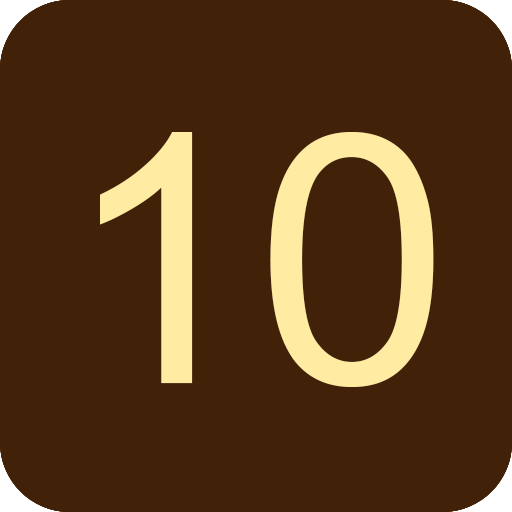
<style>
.page{position:relative;width:512px;height:512px;background:#412209}
.page>*{position:absolute;margin:0}
.t1{font:349px "ArialMT";color:#ffeba1}
</style>
<div class="page">
<p class="t1" style="left:100px;top:132px;width:334px;height:255px">10</p>
</div>
